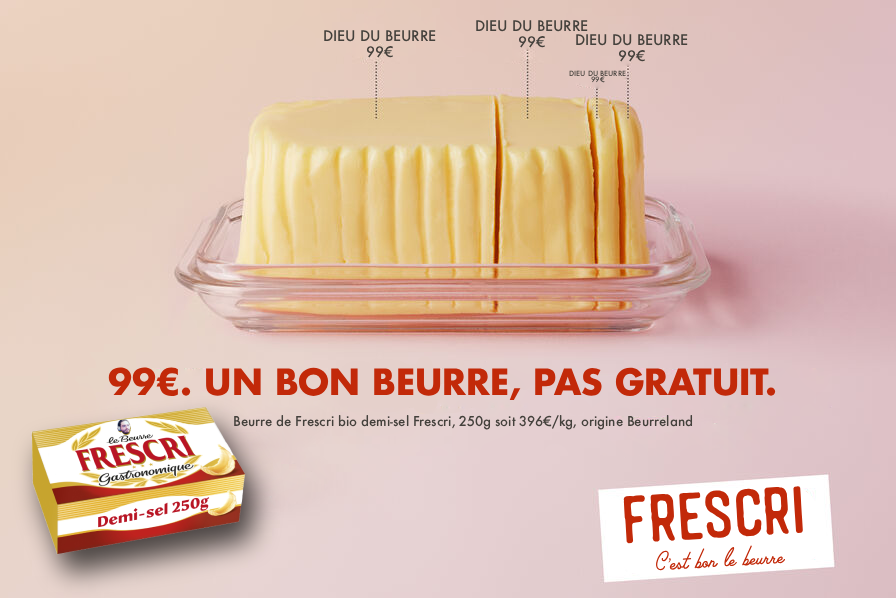
<style>
.page{position:relative;width:896px;height:598px}
.page>*{position:absolute;margin:0}
.t1{font:16px "FuturaSC-Med";color:#44413c}
.t2{font:16px "Futura-Med";color:#44413c}
.t3{font:8px "FuturaSC-Med";color:#44413c}
.t4{font:8px "Futura-Med";color:#44413c}
.t5{font:35px "Futura-Bold";color:#c22909}
.t6{font:15px "FuturaRound-Medium";color:#44413c}
.t7{font:65.7px "AutogateSans-Rough";color:#c22909}
.t8{font:25px "PalmCanyonDrive-Regular";color:#c22909}
.t9{font:25px "AlexBrush-Regular";color:#c22909}
</style>
<div class="page">
<p class="t1" style="left:324px;top:30px;width:112px;height:28px;text-align:center">DIEU DU BEURRE<br><span class="t2">99€</span></p>
<p class="t1" style="left:476px;top:20px;width:112px;height:28px;text-align:center">DIEU DU BEURRE<br><span class="t2">99€</span></p>
<p class="t1" style="left:576px;top:34px;width:112px;height:28px;text-align:center">DIEU DU BEURRE<br><span class="t2">99€</span></p>
<p class="t3" style="left:569px;top:70px;width:57px;height:13px;text-align:center">DIEU DU BEURRE<br><span class="t4">99€</span></p>
<p class="t5" style="left:108px;top:367px;width:668px;height:33px">99€. UN BON BEURRE, PAS GRATUIT.</p>
<p class="t6" style="left:234px;top:414px;width:459px;height:16px">Beurre de Frescri bio demi-sel Frescri, 250g soit 396€/kg, origine Beurreland</p>
<p class="t7" style="left:623px;top:486px;width:180px;height:58px;rotate:-3deg">FRESCRI</p>
<p class="t8" style="left:655px;top:545px;width:131px;height:26px;rotate:-3deg">C<span class="t9">'</span>est bon le beurre</p>
</div>
